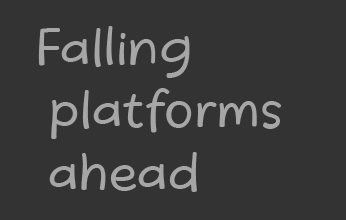
<style>
.page{position:relative;width:346px;height:220px;background:#333333}
.page>*{position:absolute;margin:0}
.t1{font:52.2px "BeatificMargella";color:#a6a6a6}
</style>
<div class="page">
<p class="t1" style="left:38px;top:26px;width:243px;height:166px;text-align:justify">Falling<br> platforms<br> ahead</p>
</div>
